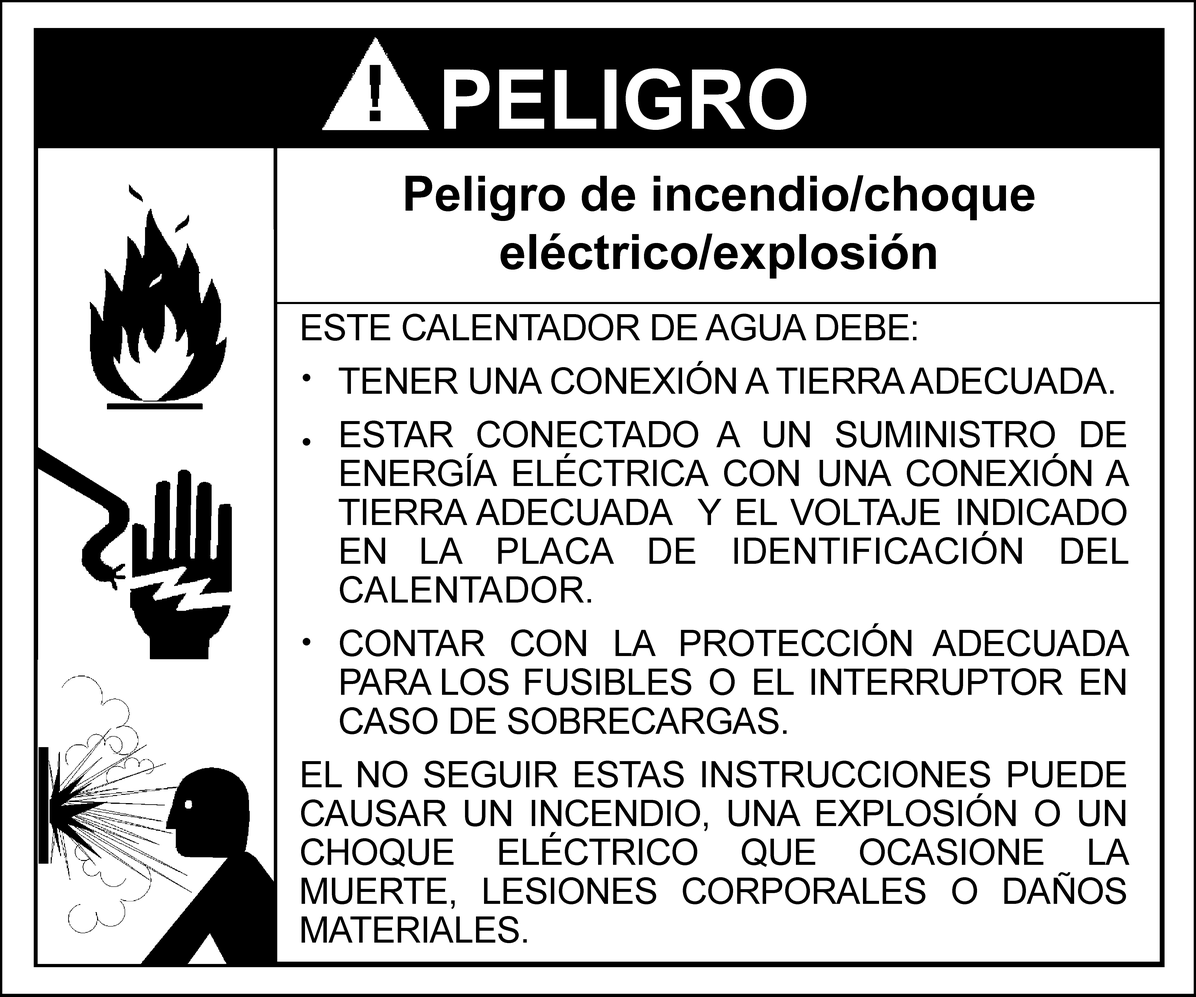
<style>
.page{position:relative;width:1196px;height:997px;background:#ffffff}
.page>*{position:absolute;margin:0}
.t1{font:48.6px "Arial-BoldMT";color:#000000}
.t2{font:36.4px/38.9px "ArialMT";letter-spacing:-0.02em;color:#000000}
.t3{font:36.4px/38.9px "ArialMT";color:#000000}
.t4{font:31.1px "ArialMT";letter-spacing:-0.002em;color:#000000}
</style>
<div class="page">
<p class="t1" style="left:406px;top:175px;width:628px;height:104px;text-align:center">Peligro de incendio/choque eléctrico/explosión</p>
<p class="t2" style="left:301px;top:314px;width:828px;height:629px;text-align:justify">ESTE CALENTADOR DE AGUA DEBE:<br>TENER UNA CONEXIÓN A TIERRA ADECUADA.<br>ESTAR CONECTADO A UN SUMINISTRO DE ENERGÍA ELÉCTRICA CON UNA CONEXIÓN A TIERRA ADECUADA  Y EL VOLTAJE INDICADO   EN <span class="t3">LA PLACA DE IDENTIFICACIÓN DEL CALENTADOR.<br></span>CONTAR CON LA PROTECCIÓN ADECUADA PARA LOS  FUSIBLES O EL INTERRUPTOR EN CASO DE SOBRECARGAS.<br>EL NO SEGUIR ESTAS INSTRUCCIONES PUEDE CAUSAR UN INCENDIO, UNA EXPLOSIÓN O UN CHOQUE ELÉCTRICO QUE OCASIONE LA MUERTE, LESIONES CORPORALES O DAÑOS MATERIALES.</p>
<p class="t4" style="left:303px;top:374px;width:7px;height:7px">•</p>
<p class="t4" style="left:303px;top:438px;width:7px;height:8px">•</p>
<p class="t4" style="left:303px;top:638px;width:7px;height:8px">•</p>
</div>
